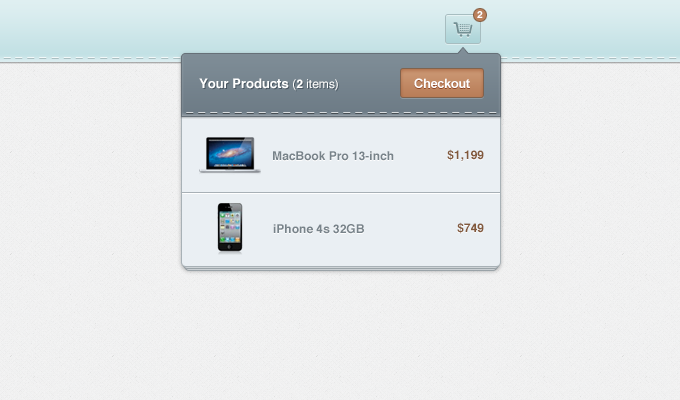
<style>
.page{position:relative;width:680px;height:400px}
.page>*{position:absolute;margin:0}
.t1{font:10px "Helvetica-Bold";color:#ffffff}
.t2{font:13px "Helvetica-Bold";color:#ffffff}
.t3{font:12px "Helvetica";color:#ffffff}
.t4{font:12px "Helvetica-Bold";color:#ffffff}
.t5{font:13px "Arial-BoldMT";letter-spacing:-0.035em;color:#ffffff}
.t6{font:12px "Helvetica-Bold";color:#82593c}
.t7{font:12px "Helvetica-Bold";color:#78838a}
</style>
<div class="page">
<p class="t1" style="left:477px;top:11px;width:6px;height:7px">2</p>
<p class="t2" style="left:199px;top:78px;width:139px;height:13px">Your Products <span class="t3">(</span><span class="t4">2</span><span class="t3"> items)</span></p>
<p class="t5" style="left:414px;top:78px;width:56px;height:10px">Checkout</p>
<p class="t6" style="left:447px;top:149px;width:37px;height:12px">$1,199</p>
<p class="t7" style="left:273px;top:151px;width:121px;height:10px">MacBook Pro 13-inch</p>
<p class="t6" style="left:457px;top:222px;width:27px;height:12px">$749</p>
<p class="t7" style="left:273px;top:224px;width:91px;height:10px">iPhone 4s 32GB</p>
</div>
